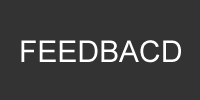
<style>
.page{position:relative;width:200px;height:100px;background:#333333}
.page>*{position:absolute;margin:0}
.t1{font:30px "ArialMT";color:#ffffff;text-transform:uppercase}
</style>
<div class="page">
<p class="t1" style="left:21px;top:40px;width:160px;height:23px">feedbacd</p>
</div>
